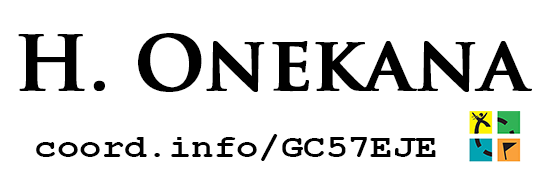
<style>
.page{position:relative;width:543px;height:189px;background:#ffffff}
.page>*{position:absolute;margin:0}
.t1{font:75px "TrajanPro-Bold";color:#000000;font-weight:bold}
.t2{font:33.3px "CourierNewPS-BoldMT";color:#000000;scale:1.12 1}
</style>
<div class="page">
<p class="t1" style="left:18px;top:33px;width:514px;height:59px">H. Onekana</p>
<p class="t2" style="left:36px;top:134px;width:400px;height:27px">coord.info/GC57EJE</p>
</div>
